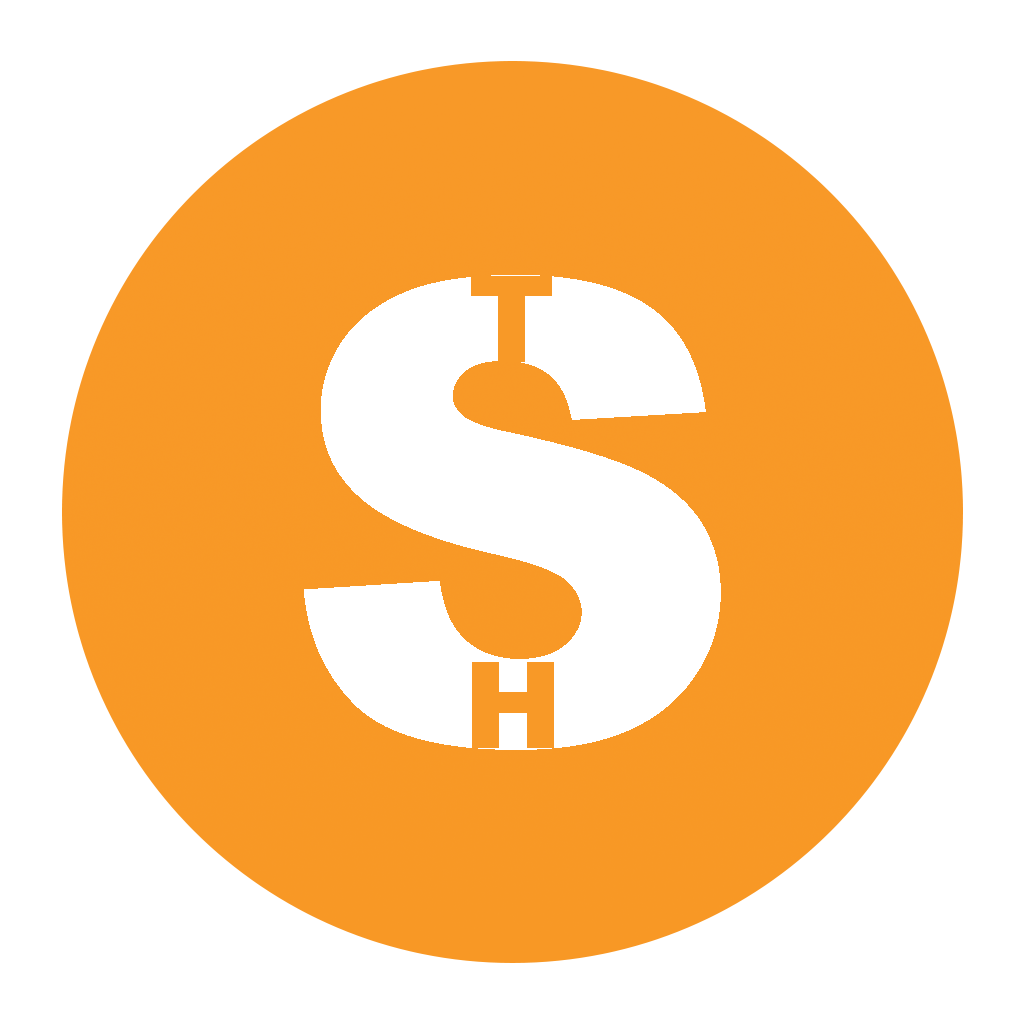
<style>
.page{position:relative;width:1024px;height:1024px;background:#ffffff}
.page>*{position:absolute;margin:0}
.t1{font:640px "Arial-Black";color:#ffffff}
.t2{font:120px "Arial-Black";color:#f89927}
</style>
<div class="page">
<p class="t1" style="left:304px;top:275px;width:417px;height:475px">S</p>
<p class="t2" style="left:471px;top:276px;width:81px;height:86px">T</p>
<p class="t2" style="left:472px;top:662px;width:82px;height:86px">H</p>
</div>
